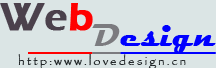
<style>
.page{position:relative;width:216px;height:68px;background:#dbe5e5}
.page>*{position:absolute;margin:0}
.t1{font:40px "ErasITC-Demi";letter-spacing:0.02em;color:#4b414c;font-weight:bold}
.t2{font:40px "ErasITC-Demi";letter-spacing:0.02em;color:#ff0000;font-weight:bold}
.t3{font:32px "Magneto-Bold";letter-spacing:0.02em;color:#0000ff;text-decoration:underline}
.t4{font:32px "Magneto-Bold";letter-spacing:0.02em;color:#ff0000;text-decoration:underline}
.t5{font:32px "Magneto-Bold";letter-spacing:0.02em;color:#7b7b7f;text-decoration:underline}
</style>
<div class="page">
<p class="t1" style="left:0px;top:3px;width:93px;height:28px">We<span class="t2">b</span></p>
<p class="t3" style="left:28px;top:24px;width:188px;height:30px"><span class="t4">     </span><span class="t5">D</span>esign</p>
</div>
